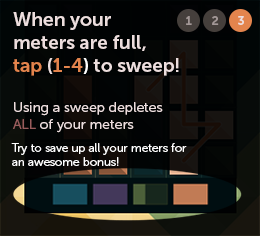
<style>
.page{position:relative;width:260px;height:236px}
.page>*{position:absolute;margin:0}
.t1{font:19.1px "MuseoSans-700";color:#eddede}
.t2{font:19.1px "MuseoSans-700";color:#e3844d}
.t3{font:19.1px "MuseoSans-700";color:#ffffff}
.t4{font:14px "MuseoSans-300";color:#eddede}
.t5{font:14px "MuseoSans-300";color:#985c5c}
.t6{font:12.3px "MuseoSans-700";color:#a39897}
.t7{font:12.3px "MuseoSans-700";color:#eddede}
.t8{font:11.7px "MuseoSans-300";color:#ffffff}
</style>
<div class="page">
<p class="t1" style="left:13px;top:12px;width:166px;height:121px">When your <br>meters are full, <br><span class="t2">tap </span>(<span class="t2">1-4</span><span class="t3">) </span>to sweep!<br><br><span class="t4">Using a sweep depletes <br></span><span class="t5">ALL</span><span class="t4"> of your meters</span></p>
<p class="t6" style="left:186px;top:16px;width:6px;height:9px">1</p>
<p class="t6" style="left:212px;top:16px;width:7px;height:9px">2</p>
<p class="t7" style="left:238px;top:16px;width:6px;height:9px">3</p>
<p class="t8" style="left:11px;top:143px;width:176px;height:23px">Try to save up all your meters for <br>an awesome bonus!</p>
</div>
